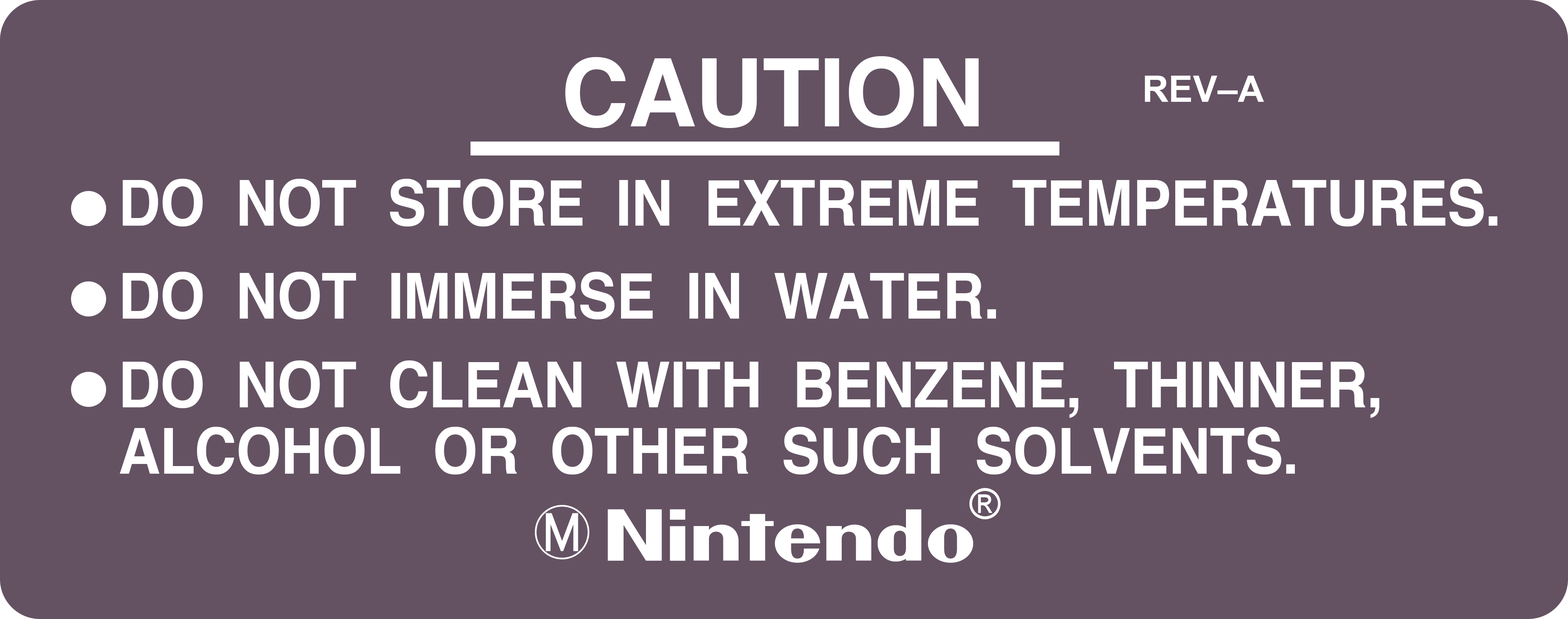
<style>
.page{position:relative;width:1568px;height:619px;background:#645263}
.page>*{position:absolute;margin:0}
.t1{font:94.1px "Helvetica-Bold";letter-spacing:-0.009em;color:#ffffff}
.t2{font:36.6px "Arial-BoldMT";color:#ffffff}
.t3{font:63.2px "Helvetica-Bold";letter-spacing:-0.009em;color:#ffffff;scale:0.92 1}
.t4{font:42.3px "ArialMT";letter-spacing:-0.009em;color:#ffffff}
.t5{font:64.2px "NuHanafudaya-Regular";letter-spacing:-0.009em;color:#ffffff}
</style>
<div class="page">
<p class="t1" style="left:565px;top:56px;width:414px;height:72px">CAUTION</p>
<p class="t2" style="left:1145px;top:76px;width:119px;height:26px">REV–A</p>
<p class="t3" style="left:123px;top:179px;width:1374px;height:48px">DO  NOT  STORE  IN  EXTREME  TEMPERATURES.</p>
<p class="t3" style="left:123px;top:272px;width:873px;height:48px">DO  NOT  IMMERSE  IN  WATER.</p>
<p class="t3" style="left:123px;top:361px;width:1256px;height:57px">DO  NOT  CLEAN  WITH  BENZENE,  THINNER,</p>
<p class="t3" style="left:120px;top:427px;width:1175px;height:48px">ALCOHOL  OR  OTHER  SUCH  SOLVENTS.</p>
<p class="t4" style="left:969px;top:488px;width:32px;height:32px">®</p>
<p class="t5" style="left:607px;top:509px;width:366px;height:54px">Nintendo</p>
</div>
